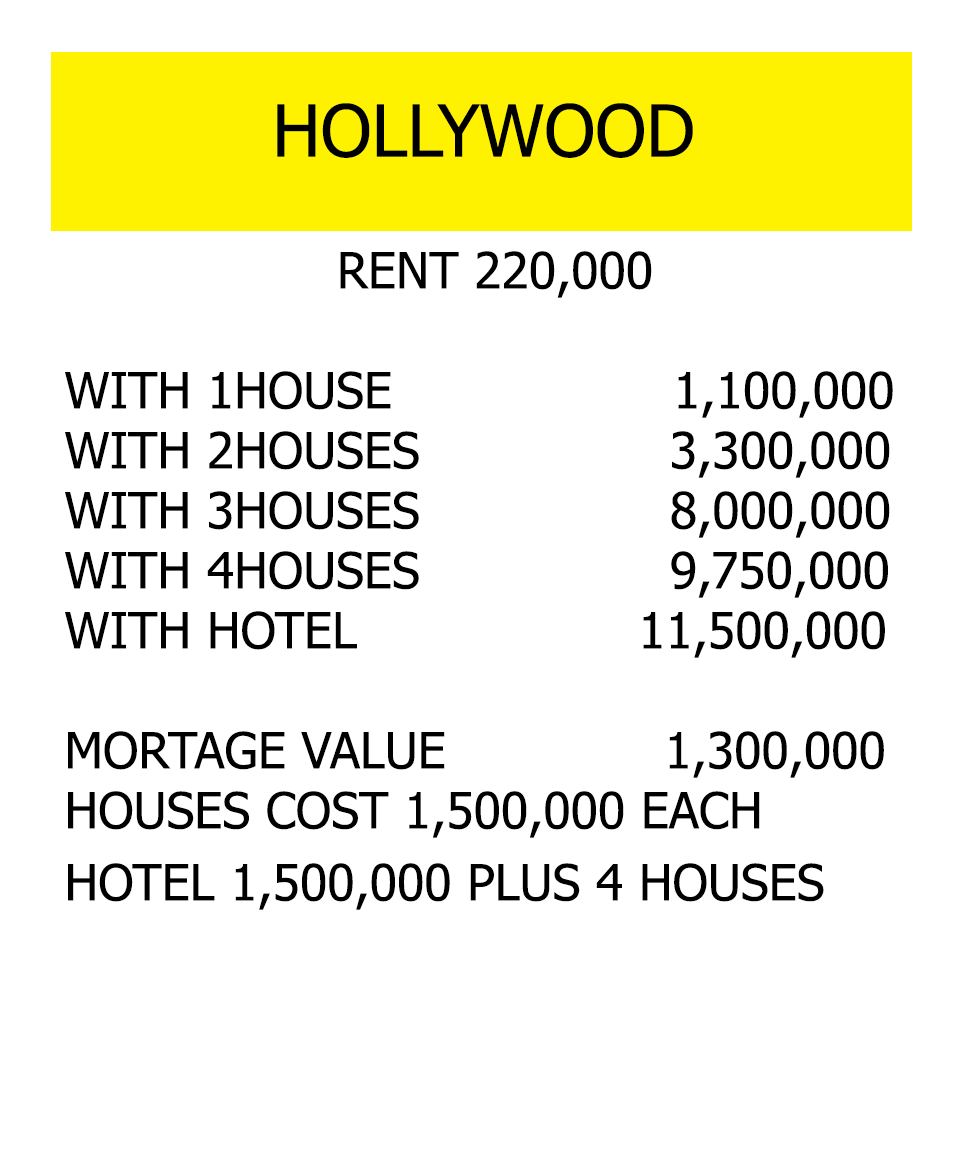
<style>
.page{position:relative;width:966px;height:1164px;background:#ffffff}
.page>*{position:absolute;margin:0}
.t1{font:72px "Tahoma";color:#000000}
.t2{font:50px "Tahoma";color:#010000}
</style>
<div class="page">
<p class="t1" style="left:277px;top:103px;width:416px;height:55px">HOLLYWOOD</p>
<p class="t2" style="left:65px;top:251px;width:828px;height:659px;text-align:center">RENT 220,000<br><br>WITH 1HOUSE                  1,100,000<br>WITH 2HOUSES                3,300,000<br>WITH 3HOUSES                8,000,000<br>WITH 4HOUSES                9,750,000<br>WITH HOTEL                  11,500,000<br><br>MORTAGE VALUE              1,300,000<br>HOUSES COST 1,500,000 EACH<br>HOTEL 1,500,000 PLUS 4 HOUSES</p>
</div>
